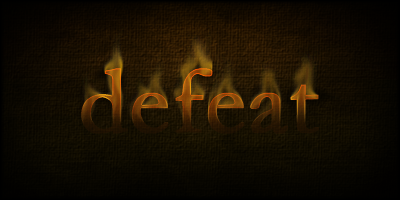
<style>
.page{position:relative;width:400px;height:200px}
.page>*{position:absolute;margin:0}
.t1{font:96px "Garamond";font-weight:bold}
</style>
<div class="page">
<p class="t1" style="left:81px;top:68px;width:238px;height:66px">defeat</p>
<p class="t1" style="left:81px;top:68px;width:238px;height:66px">defeat</p>
<p class="t1" style="left:81px;top:68px;width:238px;height:66px">defeat</p>
</div>
